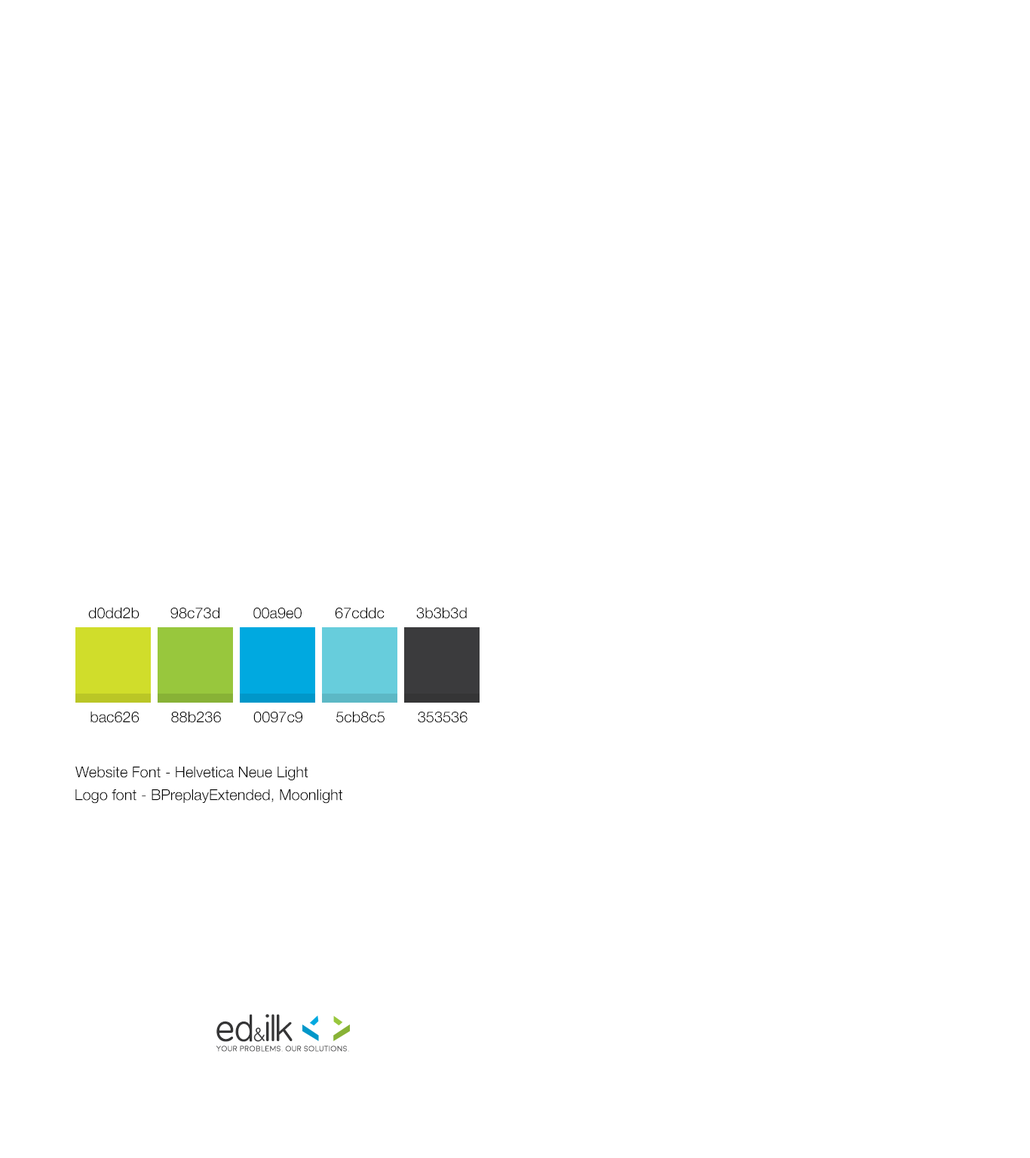
<style>
.page{position:relative;width:1030px;height:1158px;background:#ffffff}
.page>*{position:absolute;margin:0}
.t1{font:15.1px "HelveticaNeue-Light";color:#000000}
.t2{font:34.4px "BPreplay";letter-spacing:-0.06em;color:#353536}
.t3{font:17.7px "BPreplay";letter-spacing:-0.06em;color:#3b3b3d;scale:0.96 1}
.t4{font:7.5px "Moon-Light";color:#3b3b3d;font-weight:bold}
</style>
<div class="page">
<p class="t1" style="left:88px;top:607px;width:51px;height:12px">d0dd2b</p>
<p class="t1" style="left:170px;top:607px;width:49px;height:12px">98c73d</p>
<p class="t1" style="left:253px;top:608px;width:49px;height:11px">00a9e0</p>
<p class="t1" style="left:335px;top:607px;width:49px;height:12px">67cddc</p>
<p class="t1" style="left:416px;top:607px;width:51px;height:12px">3b3b3d</p>
<p class="t1" style="left:90px;top:711px;width:49px;height:12px">bac626</p>
<p class="t1" style="left:171px;top:711px;width:50px;height:12px">88b236</p>
<p class="t1" style="left:253px;top:712px;width:49px;height:11px">0097c9</p>
<p class="t1" style="left:336px;top:711px;width:48px;height:12px">5cb8c5</p>
<p class="t1" style="left:418px;top:712px;width:49px;height:11px">353536</p>
<p class="t1" style="left:75px;top:766px;width:233px;height:14px">Website Font - Helvetica Neue Light</p>
<p class="t1" style="left:75px;top:789px;width:267px;height:15px">Logo font - BPreplayExtended, Moonlight</p>
<p class="t2" style="left:216px;top:1014px;width:77px;height:28px">ed<span class="t3">&amp;</span>ilk</p>
<p class="t4" style="left:216px;top:1046px;width:133px;height:6px">Your problems. Our solutions.</p>
</div>
